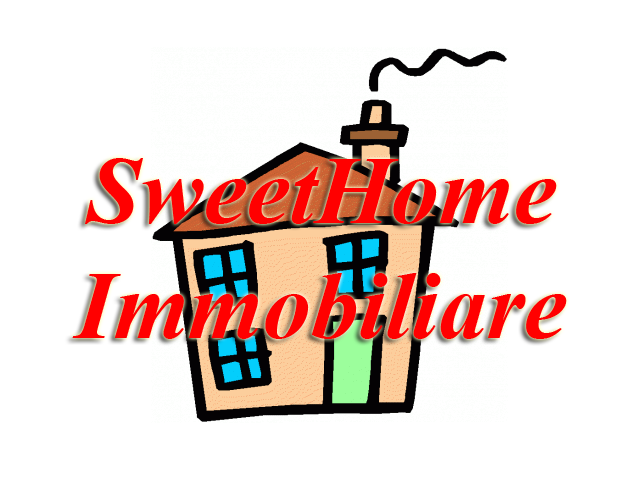
<style>
.page{position:relative;width:640px;height:480px;background:#ffffff}
.page>*{position:absolute;margin:0}
.t1{font:96px "TimesNewRomanPS-BoldItalicMT";color:#ff0000}
</style>
<div class="page">
<p class="t1" style="left:72px;top:158px;width:495px;height:181px;text-align:center">SweetHome<br>Immobiliare</p>
</div>
